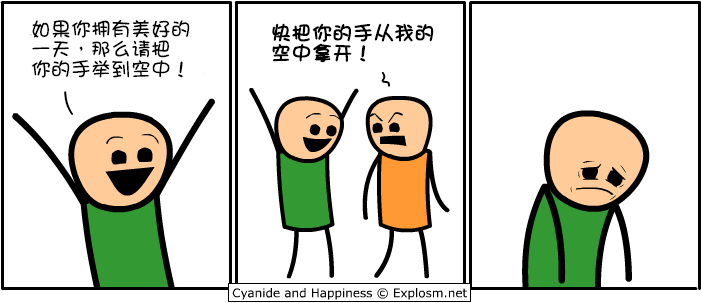
<style>
.page{position:relative;width:701px;height:303px;background:#ffffff}
.page>*{position:absolute;margin:0}
.t1{font:20px/20px "DFGirl";color:#000000}
.t2{font:20px/20px "DFGirl";color:#000000;font-weight:bold}
</style>
<div class="page">
<p class="t1" style="left:31px;top:19px;width:159px;height:59px">如果你拥有美好的<br>一天，那么请把<br>你的手举到空中！</p>
<p class="t2" style="left:272px;top:23px;width:162px;height:40px">快把你的手从我的<br>空中拿开！</p>
</div>
